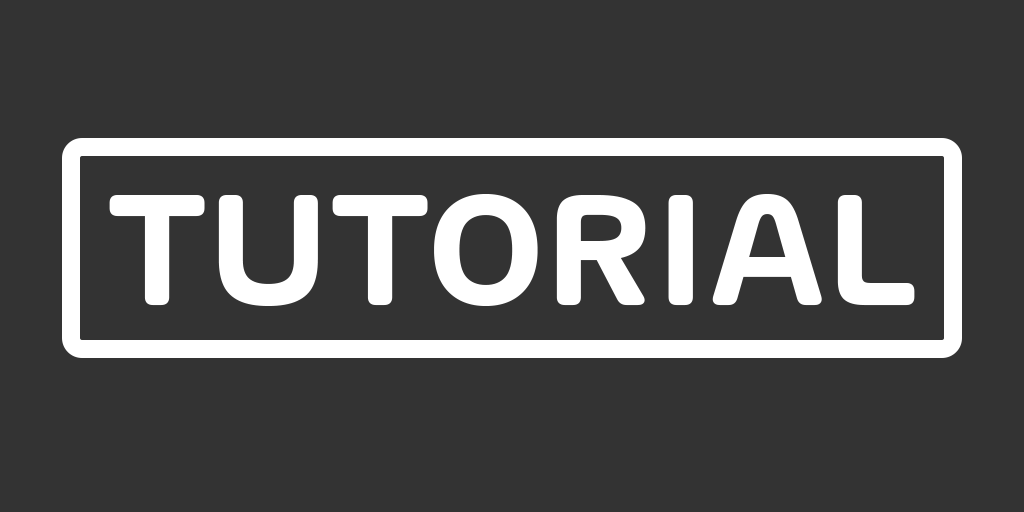
<style>
.page{position:relative;width:1024px;height:512px;background:#333333}
.page>*{position:absolute;margin:0}
.t1{font:170px "Arlon-SemiBold";color:#ffffff}
</style>
<div class="page">
<p class="t1" style="left:109px;top:194px;width:806px;height:112px">TUTORIAL</p>
</div>
